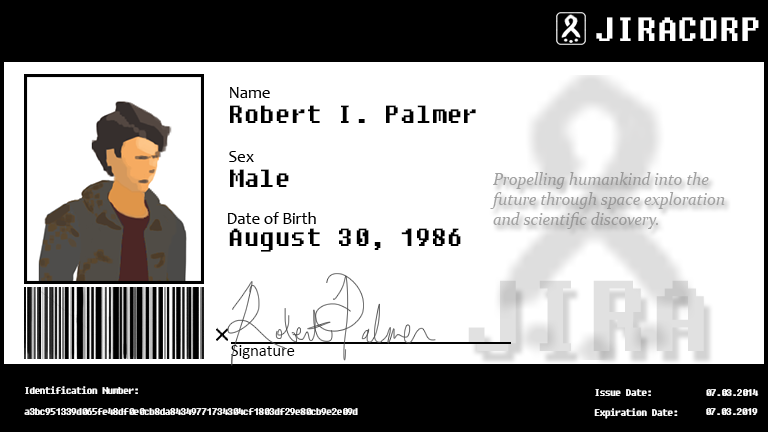
<style>
.page{position:relative;width:768px;height:432px;background:#ffffff}
.page>*{position:absolute;margin:0}
.t1{font:33.3px "Fixedsys";color:#ffffff}
.t2{font:25px "Fixedsys";color:#000000}
.t3{font:16.7px "Constantia-Italic";color:#a1a1a1}
.t4{font:16.7px "Calibri";color:#000000}
.t5{font:8.3px "Fixedsys";color:#ffffff}
</style>
<div class="page">
<p class="t1" style="left:596px;top:17px;width:163px;height:24px">JIRACORP</p>
<p class="t2" style="left:230px;top:105px;width:246px;height:18px">Robert I. Palmer</p>
<p class="t2" style="left:230px;top:169px;width:59px;height:18px">Male</p>
<p class="t3" style="left:490px;top:172px;width:235px;height:57px">Propelling humankind into the<br>future through space exploration<br>and scientific discovery.</p>
<p class="t2" style="left:229px;top:228px;width:232px;height:24px">August 30, 1986</p>
<p class="t4" style="left:231px;top:345px;width:64px;height:14px">Signature</p>
<p class="t5" style="left:25px;top:386px;width:113px;height:8px">Identification Number:</p>
<p class="t5" style="left:594px;top:389px;width:84px;height:30px">Issue Date:<br><br>Expiration Date:</p>
<p class="t5" style="left:706px;top:389px;width:53px;height:7px">07.03.2014</p>
<p class="t5" style="left:24px;top:408px;width:334px;height:7px">a3bc951339d065fe48df0e0cb8da84349771734304cf1803df29e80cb9e2e09d</p>
<p class="t5" style="left:706px;top:408px;width:52px;height:7px">07.03.2019</p>
</div>
